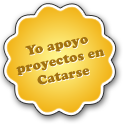
<style>
.page{position:relative;width:128px;height:128px;background:#ffffff}
.page>*{position:absolute;margin:0}
.t1{font:13px "CooperBlackStd";color:#a3730f}
.t2{font:13px "CooperBlackStd"}
</style>
<div class="page">
<p class="t1" style="left:16px;top:37px;width:89px;height:48px;text-align:center;rotate:-12deg">Yo apoyo<br>proyectos en<br>Catarse</p>
<p class="t2" style="left:17px;top:37px;width:89px;height:48px;text-align:center;rotate:-12deg">Yo apoyo<br>proyectos en<br>Catarse</p>
</div>
